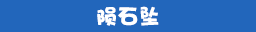
<style>
.page{position:relative;width:256px;height:32px;background:#2266bb}
.page>*{position:absolute;margin:0}
.t1{font:21.3px "DFPHaiBaoW12";color:#ffffff}
</style>
<div class="page">
<p class="t1" style="left:97px;top:6px;width:62px;height:20px">陨石坠</p>
</div>
